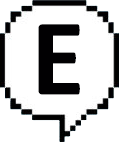
<style>
.page{position:relative;width:119px;height:142px;background:#ffffff}
.page>*{position:absolute;margin:0}
.t1{font:110.7px "Calibri-Bold";color:#010002}
</style>
<div class="page">
<p class="t1" style="left:38px;top:24px;width:42px;height:71px">E</p>
</div>
